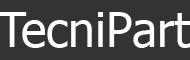
<style>
.page{position:relative;width:190px;height:60px;background:#333333}
.page>*{position:absolute;margin:0}
.t1{font:48px "Tahoma";color:#ffffff}
</style>
<div class="page">
<p class="t1" style="left:0px;top:12px;width:190px;height:36px">TecniPart</p>
</div>
